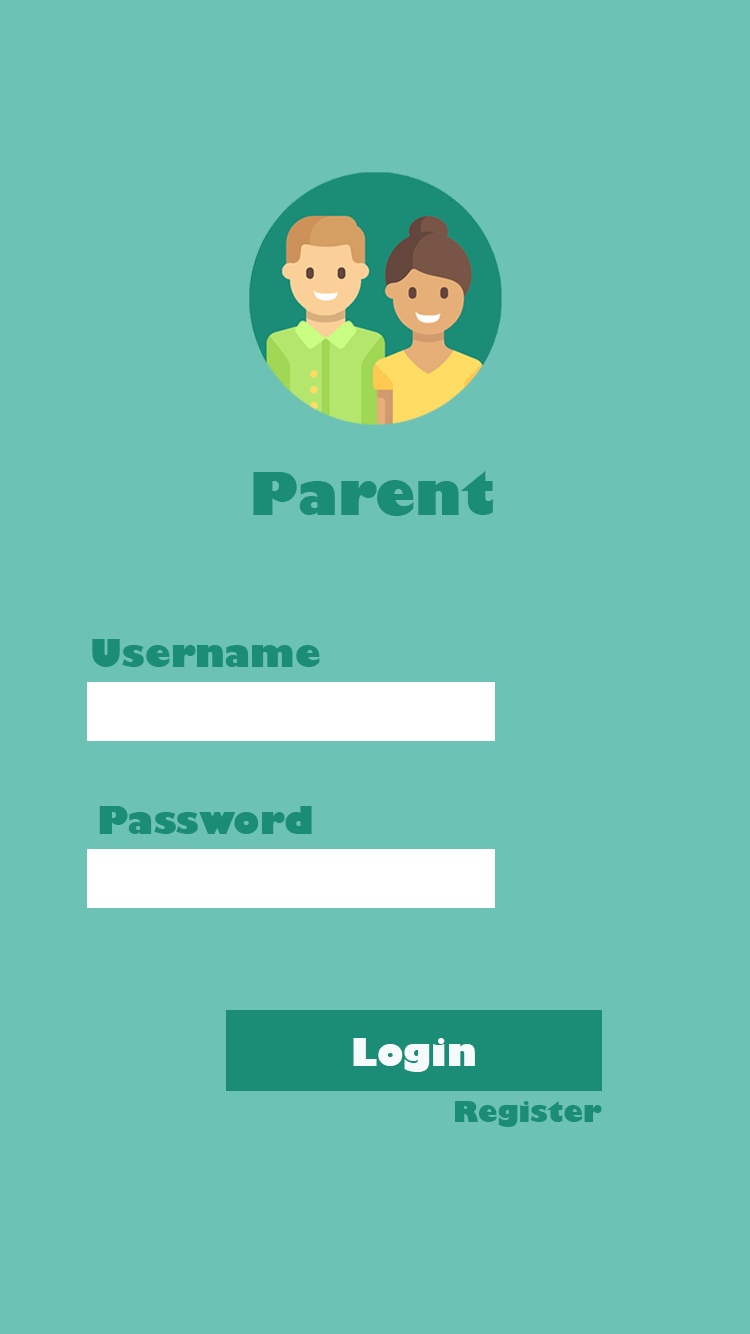
<style>
.page{position:relative;width:750px;height:1334px;background:#6dc2b6}
.page>*{position:absolute;margin:0}
.t1{font:58px "GillSans-UltraBold";color:#1b8c76}
.t2{font:37px "GillSans-UltraBold";color:#1b8c76}
.t3{font:37px "GillSans-UltraBold";color:#f4fbfa}
.t4{font:28px "GillSans-UltraBold";color:#1b8c76}
</style>
<div class="page">
<p class="t1" style="left:253px;top:471px;width:240px;height:45px">Parent</p>
<p class="t2" style="left:92px;top:639px;width:228px;height:28px">Username</p>
<p class="t2" style="left:99px;top:806px;width:213px;height:28px">Password</p>
<p class="t3" style="left:353px;top:1038px;width:122px;height:34px">Login</p>
<p class="t4" style="left:455px;top:1101px;width:147px;height:26px">Register</p>
</div>
